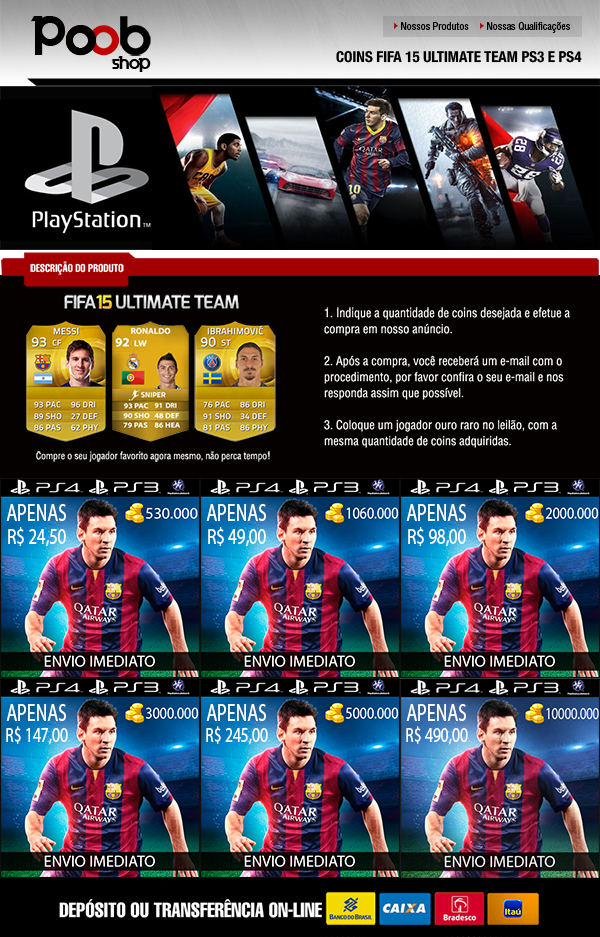
<style>
.page{position:relative;width:600px;height:937px}
.page>*{position:absolute;margin:0}
.t1{font:43px "Velocity";color:#010101}
.t2{font:41px "Velocity";color:#010101}
.t3{font:43px "Velocity";color:#000000}
.t4{font:10px "HelveticaLTStd-Cond";color:#000000}
.t5{font:15px "HelveticaNeue-CondensedBold";color:#000000}
.t6{font:14.9px "Velocity";color:#000000}
.t7{font:11px "HelveticaLTStd-Comp";color:#ffffff}
.t8{font:12px/16px "HelveticaLTStd-Cond";color:#ffffff}
.t9{font:9.3px "HelveticaLTStd-Cond";color:#ffffff}
.t10{font:22.4px "MyriadPro-Regular";color:#ffffff;scale:0.74 1}
.t11{font:24px "MyriadPro-Regular";color:#ffffff;scale:0.74 1}
.t12{font:20.8px "MyriadPro-Regular";color:#ffffff;scale:0.74 1}
.t13{font:20px "HelveticaLTStd-Comp";color:#ffffff}
</style>
<div class="page">
<p class="t1" style="left:31px;top:16px;width:35px;height:39px">P</p>
<p class="t2" style="left:66px;top:26px;width:29px;height:29px">O</p>
<p class="t3" style="left:66px;top:25px;width:31px;height:30px">O</p>
<p class="t4" style="left:401px;top:22px;width:68px;height:8px">Nossos Produtos</p>
<p class="t4" style="left:487px;top:22px;width:83px;height:11px">Nossas Qualificações</p>
<p class="t5" style="left:336px;top:50px;width:246px;height:13px">COINS FIFA 15 ULTIMATE TEAM PS3 E PS4</p>
<p class="t6" style="left:111px;top:56px;width:40px;height:16px">shop</p>
<p class="t7" style="left:30px;top:261px;width:94px;height:14px">DESCRIÇÃO DO PRODUTO</p>
<p class="t8" style="left:324px;top:307px;width:246px;height:141px">1. Indique a quantidade de coins desejada e efetue a<br>compra em nosso anúncio.<br><br>2. Após a compra, você receberá um e-mail com o<br>procedimento, por favor confira o seu e-mail e nos<br>responda assim que possível.<br><br>3. Coloque um jogador ouro raro no leilão, com a<br>mesma quantidade de coins adquiridas.</p>
<p class="t9" style="left:36px;top:451px;width:234px;height:11px">Compre o seu jogador favorito agora mesmo, não perca tempo!</p>
<p class="t10" style="left:6px;top:504px;width:60px;height:43px;text-align:center"><span class="t11">APENAS<br></span>R$ 24,50</p>
<p class="t10" style="left:206px;top:504px;width:60px;height:43px;text-align:center"><span class="t11">APENAS<br></span>R$ 49,00</p>
<p class="t10" style="left:406px;top:504px;width:60px;height:43px;text-align:center"><span class="t11">APENAS<br></span>R$ 98,00</p>
<p class="t12" style="left:6px;top:704px;width:62px;height:41px;text-align:center"><span class="t11">APENAS<br></span>R$ 147,00</p>
<p class="t12" style="left:206px;top:704px;width:62px;height:41px;text-align:center"><span class="t11">APENAS<br></span>R$ 245,00</p>
<p class="t12" style="left:406px;top:704px;width:62px;height:41px;text-align:center"><span class="t11">APENAS<br></span>R$ 490,00</p>
<p class="t13" style="left:59px;top:899px;width:263px;height:19px">DEPÓSITO OU TRANSFERÊNCIA ON-LINE</p>
</div>
